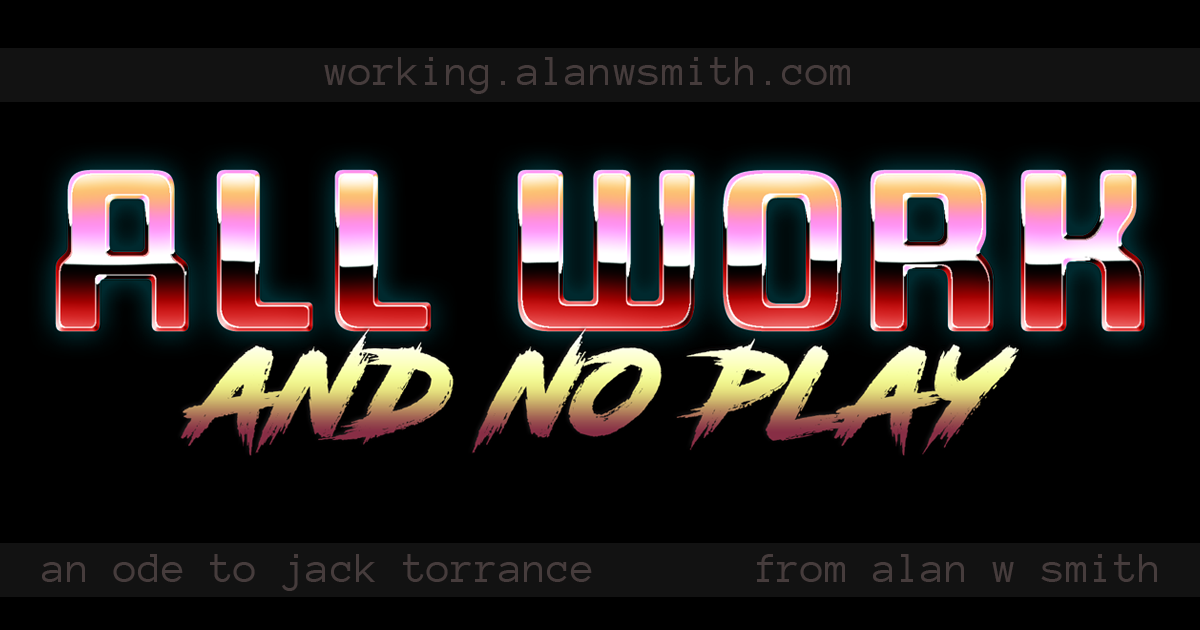
<style>
.page{position:relative;width:1200px;height:630px;background:#000000}
.page>*{position:absolute;margin:0}
.t1{font:44px "AnonymiceNerdFontCompleteM-";color:#463c3c}
</style>
<div class="page">
<p class="t1" style="left:324px;top:57px;width:526px;height:37px">working.alanwsmith.com</p>
<p class="t1" style="left:42px;top:554px;width:550px;height:37px">an ode to jack torrance</p>
<p class="t1" style="left:757px;top:554px;width:400px;height:28px">from alan w smith</p>
</div>
